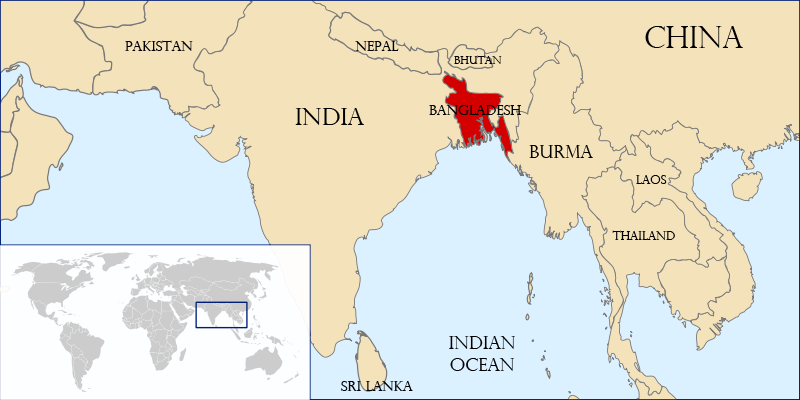
<style>
.page{position:relative;width:800px;height:400px;background:#f4e2ba}
.page>*{position:absolute;margin:0}
.t1{font:30px "PerpetuaTitlingMT-Light";color:#000000}
.t2{font:14px "PerpetuaTitlingMT-Light";color:#000000}
.t3{font:11px "PerpetuaTitlingMT-Light";color:#000000}
.t4{font:24px "PerpetuaTitlingMT-Light";color:#000000}
.t5{font:18px "PerpetuaTitlingMT-Light";color:#000000}
.t6{font:12px "PerpetuaTitlingMT-Light";color:#000000}
</style>
<div class="page">
<p class="t1" style="left:645px;top:26px;width:98px;height:22px">China</p>
<p class="t2" style="left:125px;top:40px;width:68px;height:11px">Pakistan</p>
<p class="t2" style="left:355px;top:41px;width:44px;height:10px">Nepal</p>
<p class="t3" style="left:454px;top:55px;width:48px;height:9px">Bhutan</p>
<p class="t4" style="left:295px;top:108px;width:69px;height:17px">India</p>
<p class="t2" style="left:429px;top:105px;width:92px;height:10px">Bangladesh</p>
<p class="t5" style="left:529px;top:145px;width:64px;height:13px">Burma</p>
<p class="t6" style="left:636px;top:175px;width:31px;height:9px">Laos</p>
<p class="t6" style="left:612px;top:230px;width:63px;height:10px">Thailand</p>
<p class="t5" style="left:449px;top:336px;width:66px;height:35px;text-align:center">Indian Ocean</p>
<p class="t2" style="left:341px;top:381px;width:72px;height:10px">Sri Lanka</p>
</div>
